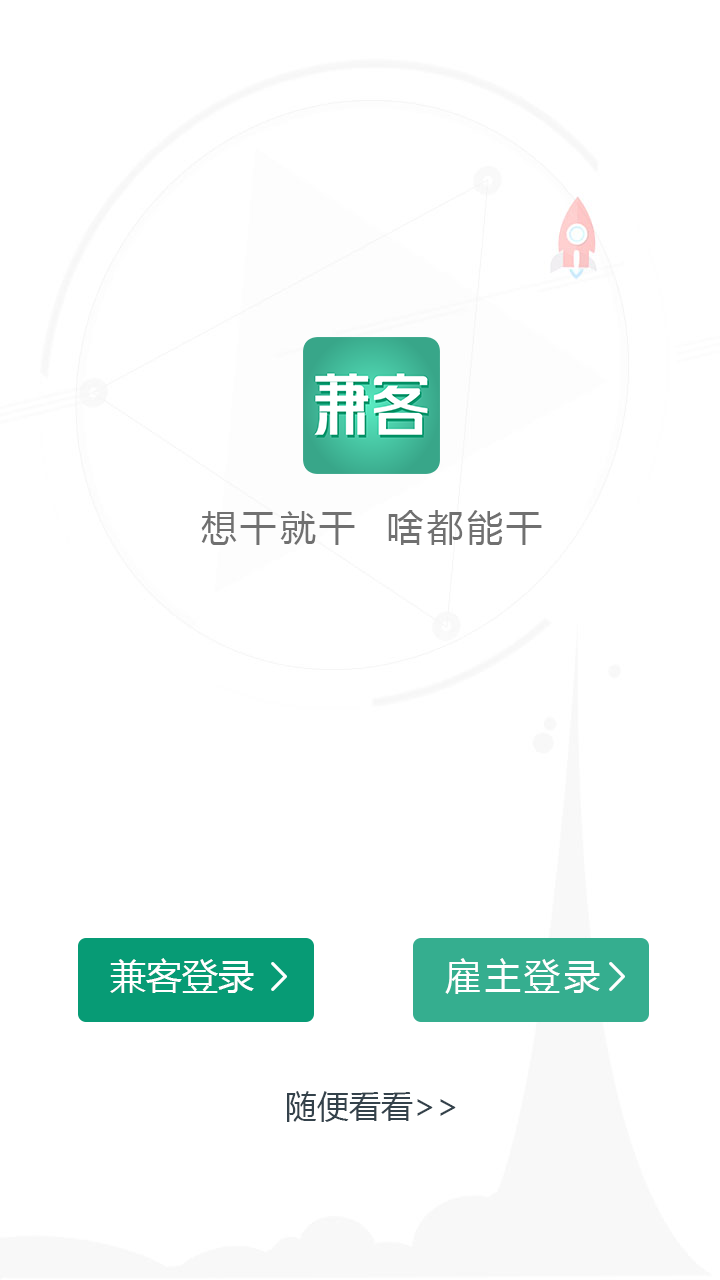
<style>
.page{position:relative;width:720px;height:1280px;background:#ffffff}
.page>*{position:absolute;margin:0}
.t1{font:36px "MicrosoftYaHei";letter-spacing:0.1em;color:#707070}
.t2{font:36px "MicrosoftYaHei";color:#ffffff}
.t3{font:36px "MicrosoftYaHei";letter-spacing:0.1em;color:#ffffff}
.t4{font:32px "MicrosoftYaHei";color:#34424b}
</style>
<div class="page">
<p class="t1" style="left:201px;top:510px;width:341px;height:35px">想干就干  啥都能干</p>
<p class="t2" style="left:110px;top:958px;width:144px;height:35px">兼客登录</p>
<p class="t3" style="left:445px;top:958px;width:155px;height:36px">雇主登录</p>
<p class="t4" style="left:287px;top:1091px;width:169px;height:31px">随便看看&gt;&gt;</p>
</div>
